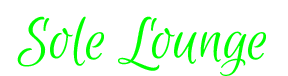
<style>
.page{position:relative;width:288px;height:76px;background:#ffffff}
.page>*{position:absolute;margin:0}
.t1{font:66.7px "EuphoriaScript-Regular";color:#00ff00}
</style>
<div class="page">
<p class="t1" style="left:17px;top:16px;width:249px;height:60px">Sole Lounge</p>
</div>
